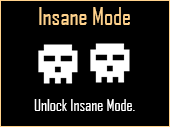
<style>
.page{position:relative;width:170px;height:127px;background:#000000}
.page>*{position:absolute;margin:0}
.t1{font:24px "AgencyFB-Reg";color:#ffd28c}
.t2{font:16px "AgencyFB-Reg";color:#ffffff}
</style>
<div class="page">
<p class="t1" style="left:39px;top:7px;width:91px;height:18px">Insane Mode</p>
<p class="t2" style="left:34px;top:99px;width:101px;height:12px">Unlock Insane Mode.</p>
</div>
